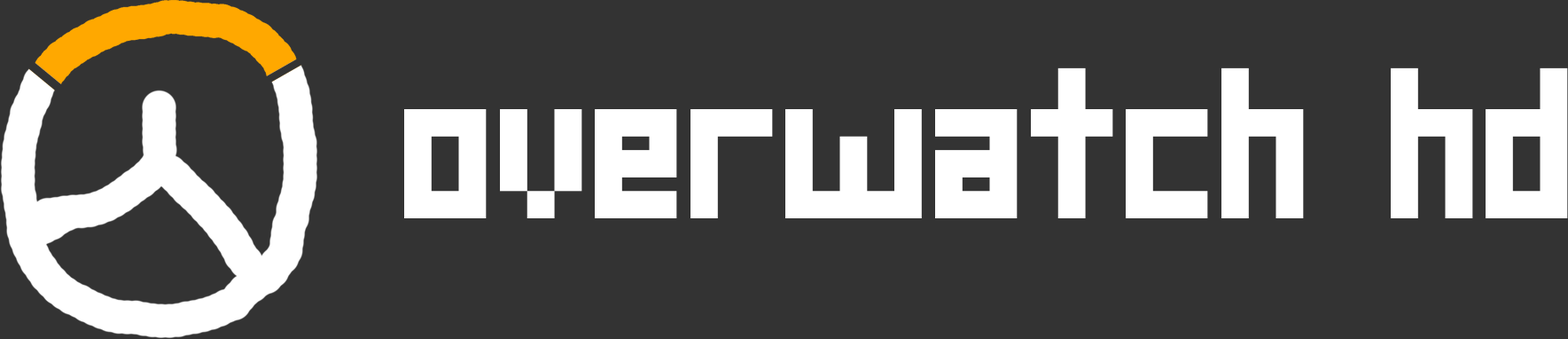
<style>
.page{position:relative;width:1568px;height:339px;background:#333333}
.page>*{position:absolute;margin:0}
.t1{font:217.9px "square-deal";color:#ffffff}
</style>
<div class="page">
<p class="t1" style="left:404px;top:67px;width:1164px;height:151px">overwatch hd</p>
</div>
